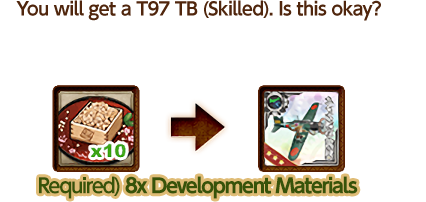
<style>
.page{position:relative;width:426px;height:202px;background:#ffffff}
.page>*{position:absolute;margin:0}
.t1{font:18px "UDShinGoPro-DeBold";letter-spacing:-0.04em;color:#50260d}
.t2{font:20px "UDShinGoPro-Bold";letter-spacing:-0.08em;color:#375309}
.t3{font:20px "UDShinGoPro-DeBold";letter-spacing:-0.08em;color:#375309}
</style>
<div class="page">
<p class="t1" style="left:16px;top:0px;width:365px;height:21px">You will get a T97 TB (Skilled). Is this okay?</p>
<p class="t2" style="left:39px;top:176px;width:319px;height:23px"><span class="t3">Required) </span>8x Development Materials</p>
</div>
